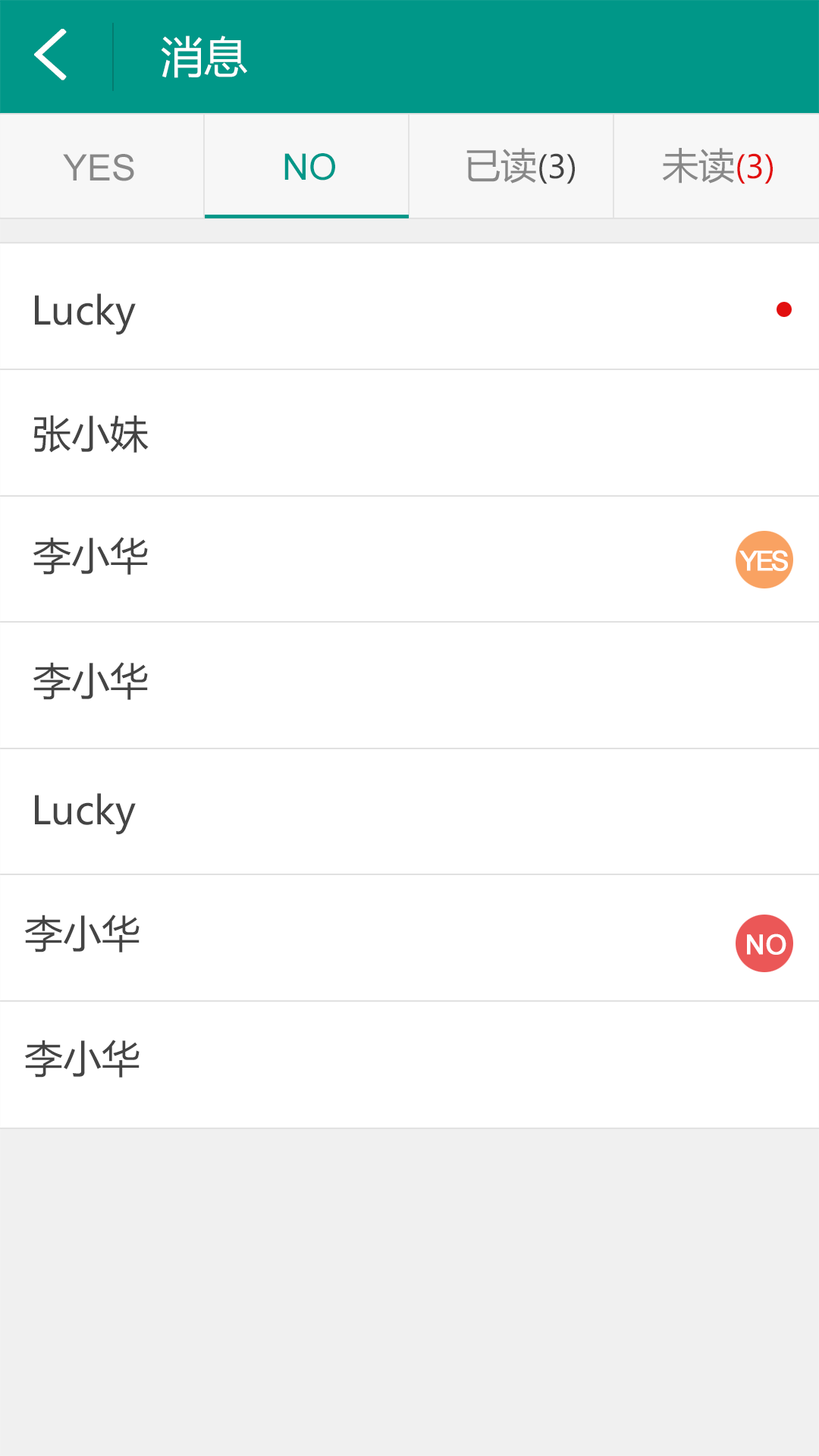
<style>
.page{position:relative;width:819px;height:1456px;background:#ffffff}
.page>*{position:absolute;margin:0}
.t1{font:70.5px "SimHei";color:#ffffff;font-weight:bold}
.t2{font:43.2px "MicrosoftYaHei";color:#ffffff}
.t3{font:31.8px "MicrosoftYaHei";color:#444444}
.t4{font:36.4px "MicrosoftYaHei";color:#888888}
.t5{font:31.8px "MicrosoftYaHei";color:#e20f0f}
.t6{font:36.4px "ArialMT";color:#888888}
.t7{font:36.4px "ArialMT";color:#009788}
.t8{font:38.7px "MicrosoftYaHei";color:#444444}
.t9{font:27.3px "ArialMT";letter-spacing:-0.12em;color:#ffffff;font-weight:bold}
.t10{font:27.3px "ArialMT";color:#ffffff;font-weight:bold}
</style>
<div class="page">
<p class="t1" style="left:34px;top:29px;width:33px;height:51px">&lt;</p>
<p class="t2" style="left:161px;top:36px;width:86px;height:42px">消息</p>
<p class="t3" style="left:466px;top:148px;width:109px;height:36px"><span class="t4">已读</span>(3)</p>
<p class="t5" style="left:662px;top:148px;width:111px;height:36px"><span class="t4">未读</span>(3)</p>
<p class="t6" style="left:63px;top:154px;width:71px;height:27px">YES</p>
<p class="t7" style="left:284px;top:153px;width:51px;height:27px">NO</p>
<p class="t8" style="left:35px;top:293px;width:101px;height:42px">Lucky</p>
<p class="t8" style="left:34px;top:415px;width:115px;height:38px">张小妹</p>
<p class="t8" style="left:33px;top:537px;width:115px;height:38px">李小华</p>
<p class="t9" style="left:739px;top:550px;width:49px;height:21px">YES</p>
<p class="t8" style="left:33px;top:662px;width:115px;height:38px">李小华</p>
<p class="t8" style="left:35px;top:793px;width:101px;height:42px">Lucky</p>
<p class="t8" style="left:24px;top:915px;width:116px;height:37px">李小华</p>
<p class="t10" style="left:747px;top:933px;width:39px;height:22px">NO</p>
<p class="t8" style="left:24px;top:1040px;width:116px;height:38px">李小华</p>
</div>
